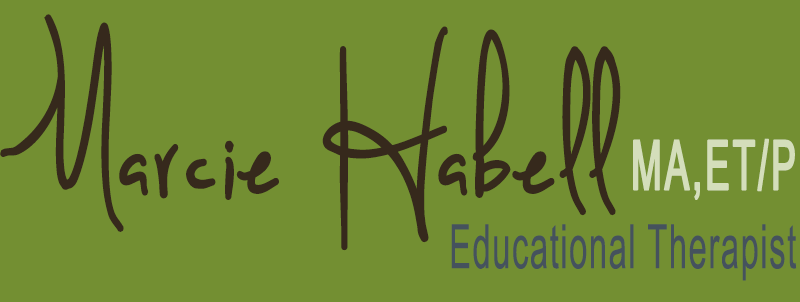
<style>
.page{position:relative;width:800px;height:302px;background:#738f32}
.page>*{position:absolute;margin:0}
.t1{font:61.4px/78.5px "ArialNarrow";letter-spacing:0.04em;color:#45525d;scale:0.65 1}
.t2{font:190.5px/105.8px "SweetlyBroken";letter-spacing:0.04em;color:#36291c;font-weight:bold;scale:0.65 1}
.t3{font:190.5px/105.8px "SweetlyBroken";letter-spacing:0.12em;color:#36291c;font-weight:bold;scale:0.65 1}
.t4{font:68.8px/105.8px "ArialNarrow";letter-spacing:0.04em;color:#d4debb;font-weight:bold;scale:0.65 1}
</style>
<div class="page">
<p class="t1" style="left:0px;top:14px;width:797px;height:267px;text-align:right"><span class="t2">Marcie Habel</span><span class="t3">l</span><span class="t4">MA,ET/P<br></span>Educational Therapist</p>
</div>
